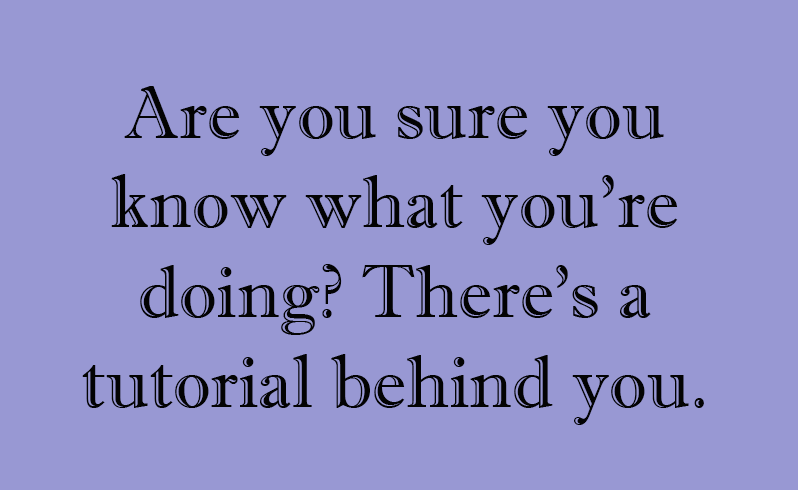
<style>
.page{position:relative;width:798px;height:490px;background:#9898d3}
.page>*{position:absolute;margin:0}
.t1{font:74.8px "ImprintMT-Shadow";color:#030303}
</style>
<div class="page">
<p class="t1" style="left:82px;top:86px;width:622px;height:339px;text-align:center">Are you sure you <br>know what you’re <br>doing? There’s a <br>tutorial behind you.</p>
</div>
